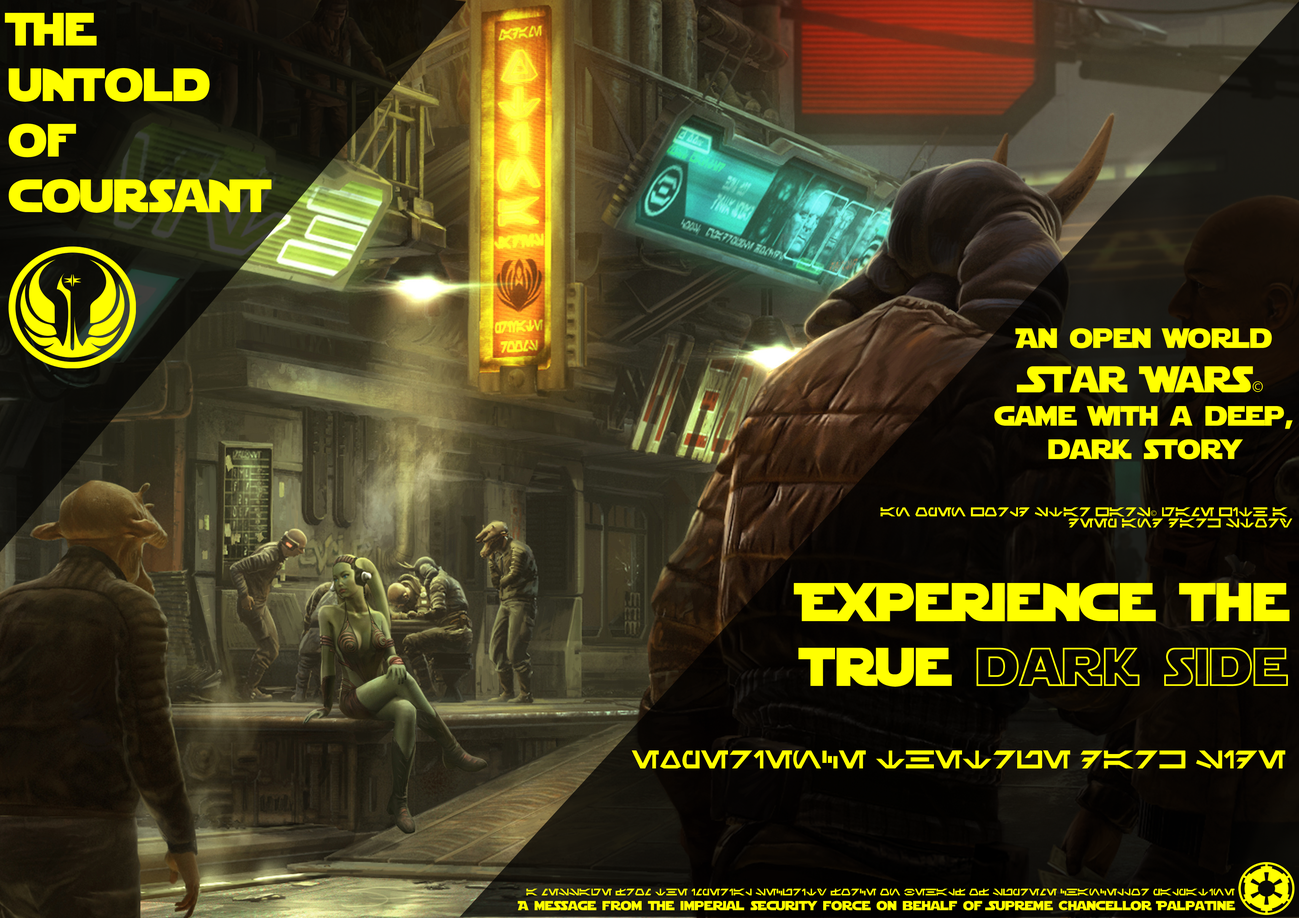
<style>
.page{position:relative;width:1299px;height:918px}
.page>*{position:absolute;margin:0}
.t1{font:46.3px "StarJediSpecialEdition";color:#ffff00}
.t2{font:27.8px "StarJedi";color:#ffff00}
.t3{font:37px "StarJedi";color:#ffff00}
.t4{font:17px "MyriadPro-Regular";color:#ffff00}
.t5{font:9.3px "Aurek-Besh";color:#ffff00}
.t6{font:9.3px "MyriadPro-Regular";color:#ffff00}
.t7{font:54px "StarJediSpecialEdition";color:#ffff00}
.t8{font:54px "StarJediHollow";color:#ffff00}
.t9{font:18.5px "Aurek-Besh";color:#ffff00}
.t10{font:6.9px "Aurek-Besh";color:#ffff00}
.t11{font:13.1px "StarJediRounded";color:#ffff00}
</style>
<div class="page">
<p class="t1" style="left:5px;top:13px;width:266px;height:200px">The <br>untold <br>of <br>coursant</p>
<p class="t2" style="left:994px;top:328px;width:298px;height:131px;text-align:center">An open world<br><span class="t3">Star Wars</span><span class="t4">©<br></span>game with a deep,<br>dark story</p>
<p class="t5" style="left:880px;top:507px;width:412px;height:21px;text-align:right">An open world Star Wars<span class="t6">© </span>game with a <br>deep and dark story</p>
<p class="t7" style="left:793px;top:583px;width:496px;height:104px;text-align:right">Experience the<br>true <span class="t8">dark side</span></p>
<p class="t9" style="left:632px;top:750px;width:653px;height:19px">Experience thetrue dark side</p>
<p class="t10" style="left:526px;top:889px;width:708px;height:7px">A message from the imperial security force on behalf of Supreme Chancellor Palpatine</p>
<p class="t11" style="left:518px;top:901px;width:717px;height:10px">A message from the imperial security force on behalf of Supreme Chancellor Palpatine</p>
</div>
